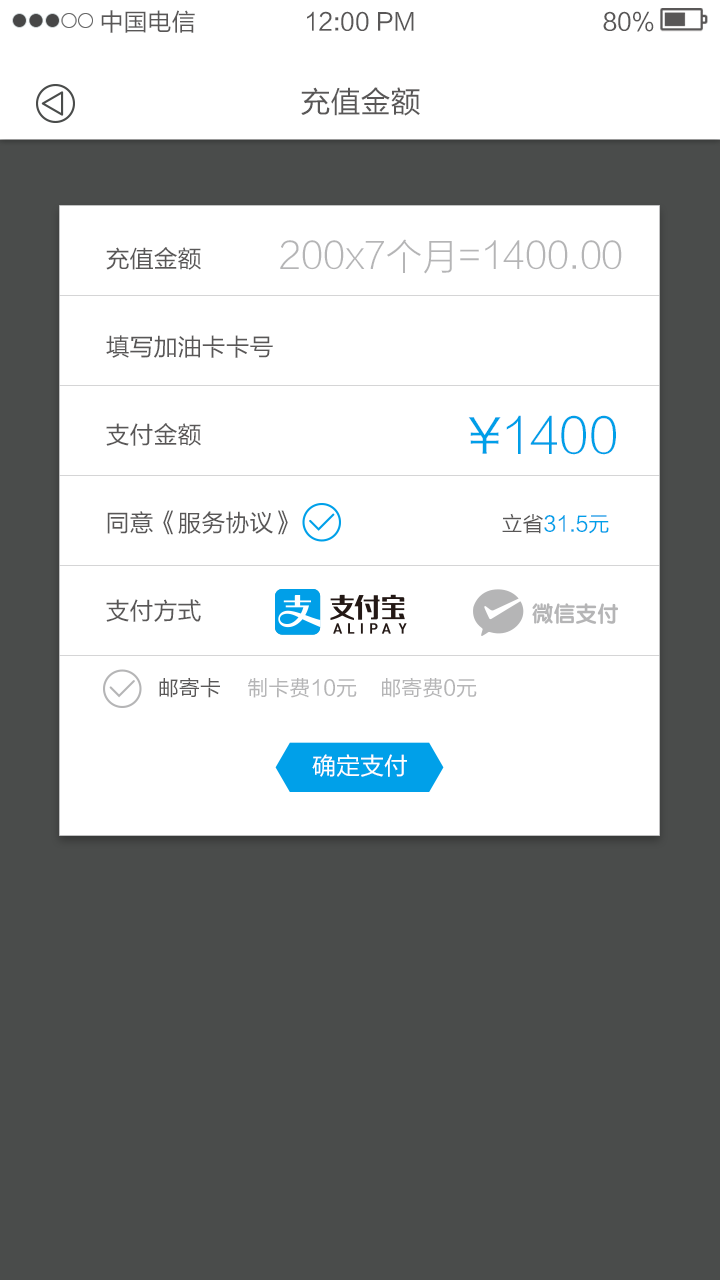
<style>
.page{position:relative;width:720px;height:1280px;background:#ffffff}
.page>*{position:absolute;margin:0}
.t1{font:24px "FZLTHK--GBK1-0";color:#595757}
.t2{font:30px "FZLTHK--GBK1-0";color:#595757}
.t3{font:36px "FZLTXHJW--GB1-0";color:#b5b5b6}
.t4{font:24px/88px "FZLTHK--GBK1-0";color:#595757}
.t5{font:21px/88px "FZLTHK--GBK1-0";color:#595757}
.t6{font:21px/88px "FZLTHK--GBK1-0";color:#00a0e9}
.t7{font:48px "FZLTXHJW--GB1-0";color:#009fe8}
.t8{font:48px "HiraginoSansGB-W3";color:#009fe8}
.t9{font:21px "FZLTHK--GBK1-0";color:#b5b5b6}
.t10{font:21px "FZLTHK--GBK1-0";color:#595757}
.t11{font:24px "FZLTHK--GBK1-0";color:#ffffff}
</style>
<div class="page">
<p class="t1" style="left:101px;top:10px;width:94px;height:23px">中国电信</p>
<p class="t1" style="left:307px;top:11px;width:107px;height:20px">12:00 PM</p>
<p class="t1" style="left:603px;top:11px;width:51px;height:21px">80%</p>
<p class="t2" style="left:301px;top:87px;width:119px;height:29px">充值金额</p>
<p class="t3" style="left:280px;top:239px;width:342px;height:35px">200x7个月=1400.00</p>
<p class="t4" style="left:106px;top:247px;width:503px;height:375px">充值金额     <br>填写加油卡卡号         <br>支付金额         <br>同意《服务协议》      <span class="t5">立省</span><span class="t6">31.5元<br></span>支付方式</p>
<p class="t7" style="left:468px;top:415px;width:148px;height:40px"><span class="t8">¥</span>1400</p>
<p class="t9" style="left:159px;top:677px;width:318px;height:21px"><span class="t10">邮寄卡    </span>制卡费10元    邮寄费0元</p>
<p class="t11" style="left:312px;top:754px;width:95px;height:23px">确定支付</p>
</div>
